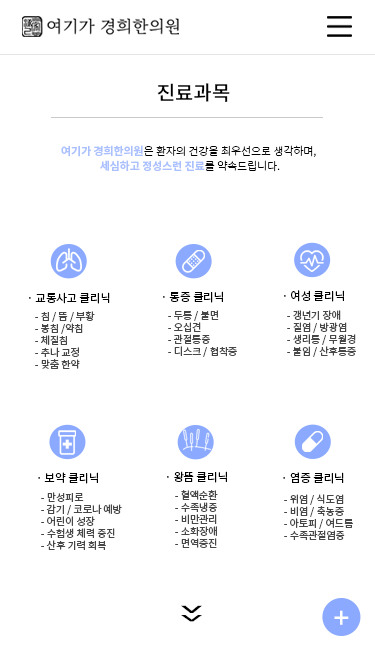
<style>
.page{position:relative;width:375px;height:667px;background:#ffffff}
.page>*{position:absolute;margin:0}
.t1{font:20px "NotoSansKR-Medium";color:#000000}
.t2{font:10.9px/15px "NotoSansKR-Light";color:#000000}
.t3{font:10.9px/15px "NotoSansKR-Bold";color:#abc1ff}
.t4{font:11.3px "NotoSansKR-Regular";color:#000000}
.t5{font:10px "NotoSansKR-Regular";color:#464646}
.t6{font:55.7px "NotoSansKR-Light";color:#000000;scale:1.27 1}
.t7{font:48.8px "NotoSansKR-Light";color:#000000;scale:1.45 1}
.t8{font:29.1px "NotoSans-Medium";color:#ffffff}
</style>
<div class="page">
<p class="t1" style="left:157px;top:83px;width:73px;height:19px">진료과목</p>
<p class="t2" style="left:61px;top:145px;width:255px;height:27px;text-align:center"><span class="t3">여기가 경희한의원</span>은 환자의 건강을 최우선으로 생각하며, <br><span class="t3">세심하고 정성스런 진료</span>를 약속드립니다.</p>
<p class="t4" style="left:29px;top:292px;width:81px;height:12px">· 교통사고 클리닉</p>
<p class="t4" style="left:163px;top:291px;width:60px;height:12px">· 통증 클리닉</p>
<p class="t4" style="left:284px;top:290px;width:60px;height:12px">· 여성 클리닉</p>
<p class="t5" style="left:35px;top:311px;width:60px;height:58px">- 침 / 뜸 / 부황<br>- 봉침 /약침<br>- 체질침<br>- 추나 교정<br>- 맞춤 한약</p>
<p class="t5" style="left:168px;top:310px;width:69px;height:47px">- 두통 / 불면 <br>- 오십견<br>- 관절통증<br>- 디스크 / 협착증</p>
<p class="t5" style="left:287px;top:310px;width:69px;height:47px">- 갱년기 장애<br>- 질염 / 방광염<br>- 생리통 / 무월경<br>- 불임 / 산후통증</p>
<p class="t4" style="left:38px;top:472px;width:60px;height:12px">· 보약 클리닉</p>
<p class="t4" style="left:167px;top:471px;width:60px;height:12px">· 왕뜸 클리닉</p>
<p class="t4" style="left:283px;top:472px;width:61px;height:12px">· 염증 클리닉</p>
<p class="t5" style="left:41px;top:492px;width:81px;height:58px">- 만성피로<br>- 감기 / 코로나 예방 <br>- 어린이 성장 <br>- 수험생 체력 증진 <br>- 산후 기력 회복</p>
<p class="t5" style="left:175px;top:490px;width:43px;height:58px">- 혈액순환<br>- 수족냉증<br>- 비만관리<br>- 소화장애<br>- 면역증진</p>
<p class="t5" style="left:284px;top:494px;width:69px;height:46px">- 위염 / 식도염<br>- 비염 / 축농증<br>- 아토피 / 여드름<br>- 수족관절염증</p>
<p class="t6" style="left:181px;top:605px;width:21px;height:8px;rotate:180deg">＾</p>
<p class="t7" style="left:181px;top:615px;width:21px;height:7px;rotate:180deg">＾</p>
<p class="t8" style="left:334px;top:610px;width:15px;height:15px">+</p>
</div>
